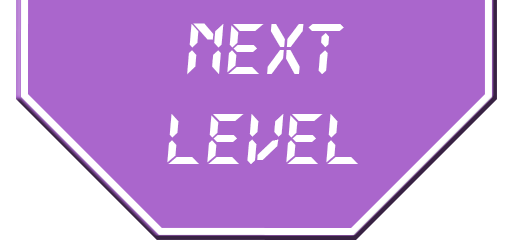
<style>
.page{position:relative;width:512px;height:240px;background:#aa66cc}
.page>*{position:absolute;margin:0}
.t1{font:79px/90px "LetsgoDigital-Regular";color:#ffffff}
</style>
<div class="page">
<p class="t1" style="left:167px;top:23px;width:191px;height:141px;text-align:center">Next Level</p>
</div>
